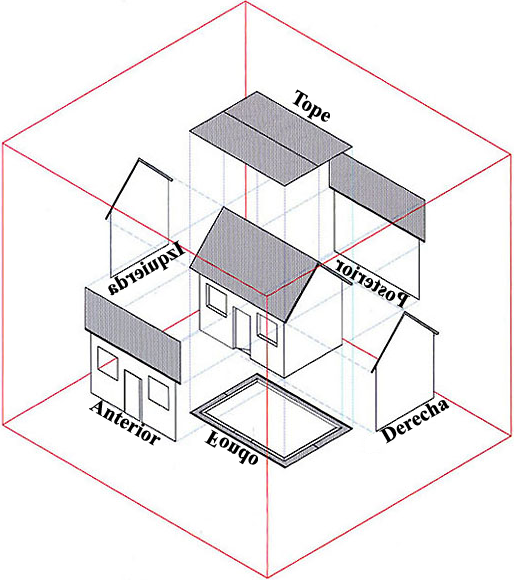
<style>
.page{position:relative;width:514px;height:580px;background:#ffffff}
.page>*{position:absolute;margin:0}
.t1{font:20.8px "TimesNewRomanPS-BoldMT";color:#000000}
</style>
<div class="page">
<p class="t1" style="left:292px;top:89px;width:38px;height:33px;rotate:30deg">Tope</p>
<p class="t1" style="left:108px;top:240px;width:78px;height:56px;rotate:150deg">Izquierda</p>
<p class="t1" style="left:335px;top:259px;width:76px;height:50px;rotate:-150deg">Posterior</p>
<p class="t1" style="left:89px;top:400px;width:72px;height:46px;rotate:30deg">Anterior</p>
<p class="t1" style="left:379px;top:400px;width:71px;height:44px;rotate:-30deg">Derecha</p>
<p class="t1" style="left:204px;top:429px;width:54px;height:36px;rotate:30deg">Fondo</p>
</div>
